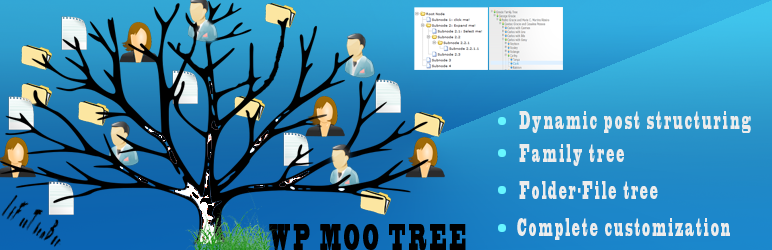
<style>
.page{position:relative;width:772px;height:250px}
.page>*{position:absolute;margin:0}
.t1{font:23.4px "BlackoakStd";letter-spacing:0.32em;color:#ececec;scale:0.26 1}
.t2{font:35px "BlackoakStd";letter-spacing:0.32em;color:#000000;scale:0.26 1}
</style>
<div class="page">
<p class="t1" style="left:519px;top:111px;width:232px;height:22px">Dynamic post structuring</p>
<p class="t1" style="left:519px;top:144px;width:105px;height:22px">Family tree</p>
<p class="t1" style="left:519px;top:181px;width:139px;height:18px">Folder-File tree</p>
<p class="t1" style="left:517px;top:218px;width:213px;height:22px">Complete customization</p>
<p class="t2" style="left:269px;top:224px;width:197px;height:26px">WP MOO TREE</p>
</div>
